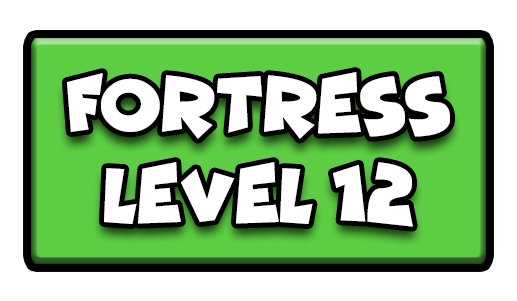
<style>
.page{position:relative;width:517px;height:301px;background:#ffffff}
.page>*{position:absolute;margin:0}
.t1{font:77.7px "Funhouse";color:#ffffff;scale:0.95 1}
</style>
<div class="page">
<p class="t1" style="left:67px;top:72px;width:383px;height:67px">FORTRESS</p>
<p class="t1" style="left:104px;top:162px;width:309px;height:65px">LEVEL 12</p>
</div>
